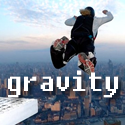
<style>
.page{position:relative;width:125px;height:125px}
.page>*{position:absolute;margin:0}
.t1{font:26.2px "Fixedsys";color:#ffffff}
</style>
<div class="page">
<p class="t1" style="left:8px;top:70px;width:110px;height:28px">gravity</p>
</div>
